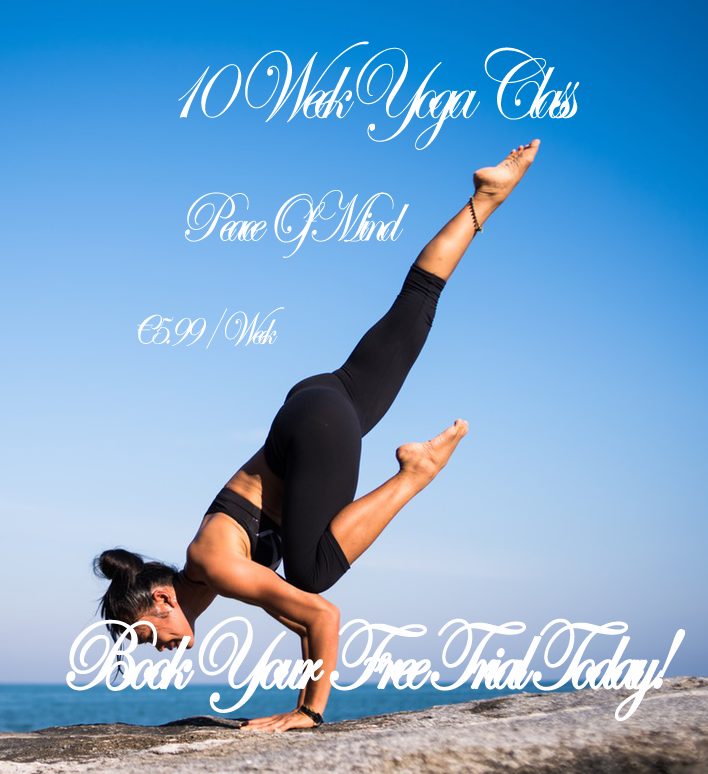
<style>
.page{position:relative;width:708px;height:774px}
.page>*{position:absolute;margin:0}
.t1{font:100px "EdwardianScriptITC";letter-spacing:-0.1em;color:#fefefe;scale:0.8 1}
.t2{font:72px "EdwardianScriptITC";letter-spacing:-0.1em;color:#fefefe;scale:0.8 1}
.t3{font:48px "EdwardianScriptITC";letter-spacing:-0.1em;color:#fefefe;scale:0.8 1}
.t4{font:60px "EdwardianScriptITC";letter-spacing:-0.1em;color:#fefefe;scale:0.8 1}
.t5{font:100px "EdwardianScriptITC";letter-spacing:-0.1em;color:#fefefe;font-weight:bold;scale:0.8 1}
</style>
<div class="page">
<p class="t1" style="left:178px;top:41px;width:402px;height:109px">10  Week Yoga Class</p>
<p class="t2" style="left:185px;top:190px;width:224px;height:68px">Peace Of Mind</p>
<p class="t3" style="left:137px;top:307px;width:148px;height:42px"><span class="t4">€</span>5.99 / Week</p>
<p class="t5" style="left:66px;top:616px;width:620px;height:106px">Book Your  Free Trial Today!</p>
</div>
